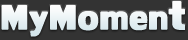
<style>
.page{position:relative;width:188px;height:40px;background:#333333}
.page>*{position:absolute;margin:0}
.t1{font:50px "LilyUPCBold";color:#fdfdfd;font-weight:bold}
.t2{font:58.3px "LilyUPCBold";color:#fdfdfd;font-weight:bold}
</style>
<div class="page">
<p class="t1" style="left:1px;top:1px;width:184px;height:36px">MyMomen<span class="t2">t</span></p>
</div>
